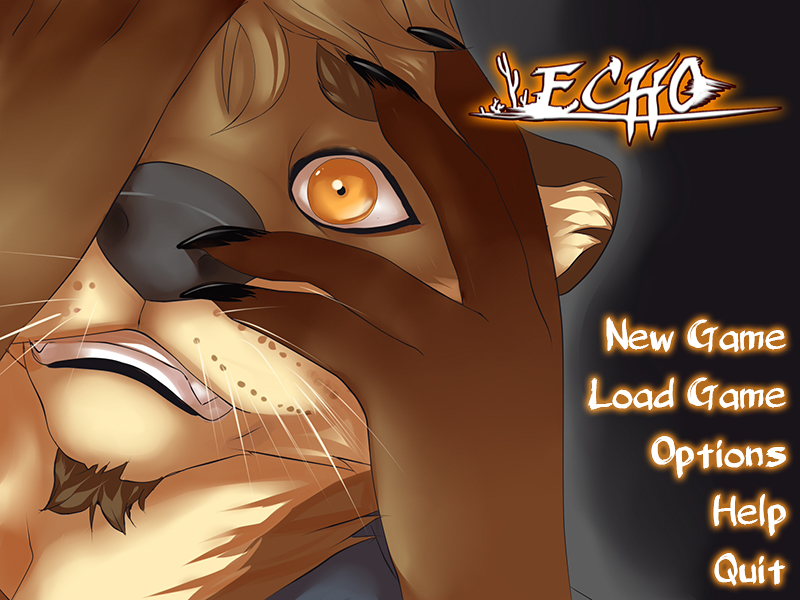
<style>
.page{position:relative;width:800px;height:600px}
.page>*{position:absolute;margin:0}
.t1{font:41.7px/58.3px "BelligerentMadness";color:#ffffff}
</style>
<div class="page">
<p class="t1" style="left:588px;top:317px;width:198px;height:269px;text-align:right">New Game<br>Load Game<br>Options<br>Help<br>Quit</p>
<p class="t1" style="left:588px;top:317px;width:198px;height:269px;text-align:right">New Game<br>Load Game<br>Options<br>Help<br>Quit</p>
</div>
